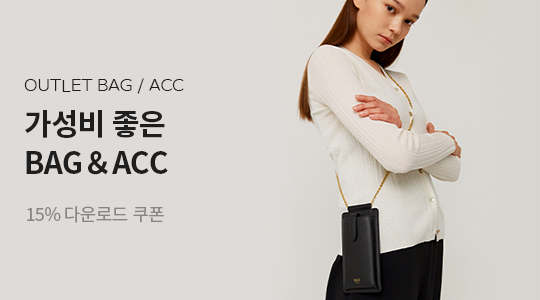
<style>
.page{position:relative;width:540px;height:300px;background:#dfdbd8}
.page>*{position:absolute;margin:0}
.t1{font:16px "NanumBarunGothicLight";letter-spacing:0.015em;color:#1e1e1e;scale:1.1 1}
.t2{font:30px "NotoSansKR-Bold";letter-spacing:-0.03em;color:#1e1e1e}
.t3{font:18px "NotoSansKR-Regular";letter-spacing:-0.03em;color:#868685}
</style>
<div class="page">
<p class="t1" style="left:24px;top:78px;width:160px;height:16px">OUTLET BAG / ACC</p>
<p class="t2" style="left:25px;top:110px;width:140px;height:28px">가성비 좋은</p>
<p class="t2" style="left:26px;top:151px;width:142px;height:24px">BAG＆ACC</p>
<p class="t3" style="left:27px;top:206px;width:137px;height:17px">15% 다운로드 쿠폰</p>
</div>
